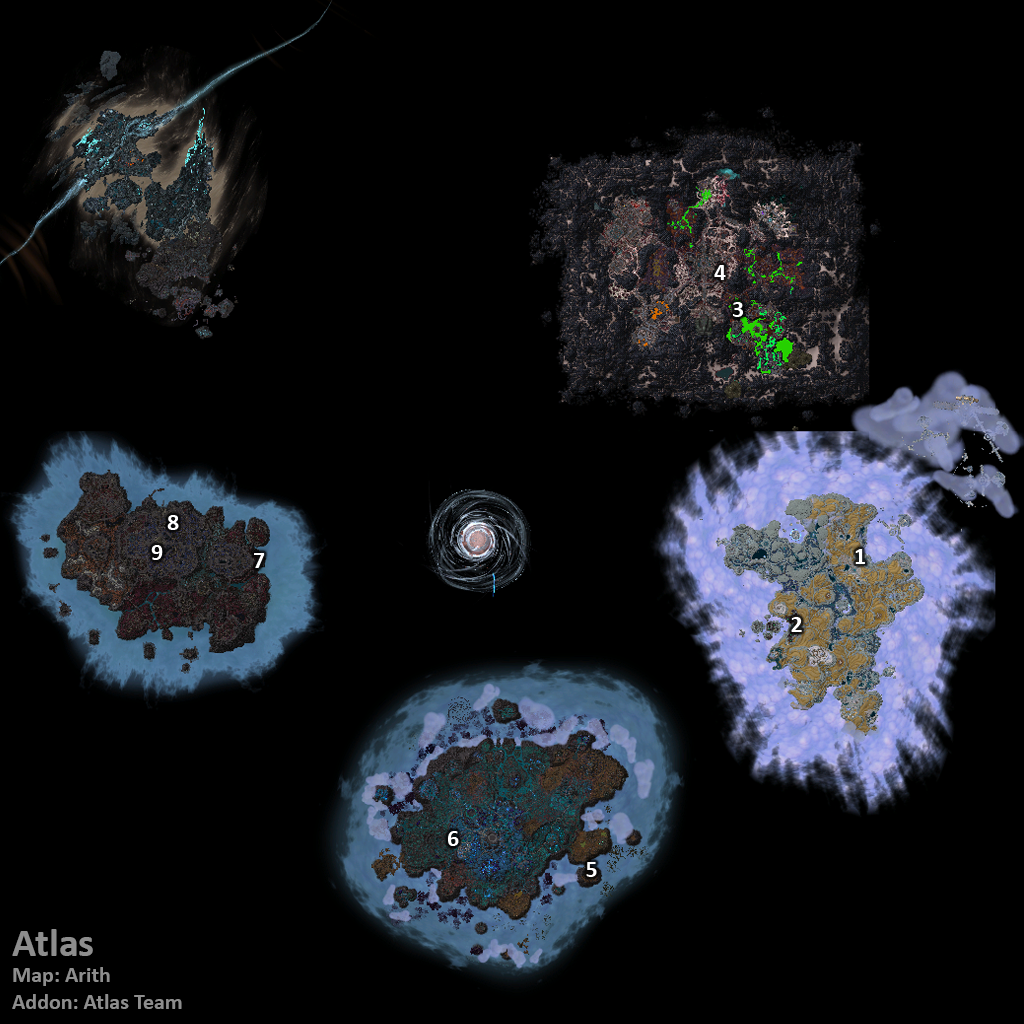
<style>
.page{position:relative;width:1024px;height:1024px;background:#000000}
.page>*{position:absolute;margin:0}
.t1{font:24px "Calibri-Bold";color:#ffffff}
.t2{font:22px "Calibri-Bold";color:#8d8d8d}
.t3{font:40px "Calibri-Bold";color:#8d8d8d}
</style>
<div class="page">
<p class="t1" style="left:714px;top:265px;width:12px;height:15px">4</p>
<p class="t1" style="left:733px;top:302px;width:10px;height:15px">3</p>
<p class="t1" style="left:167px;top:515px;width:12px;height:15px">8</p>
<p class="t1" style="left:151px;top:545px;width:12px;height:15px">9</p>
<p class="t1" style="left:254px;top:553px;width:11px;height:15px">7</p>
<p class="t1" style="left:855px;top:549px;width:10px;height:15px">1</p>
<p class="t1" style="left:791px;top:617px;width:11px;height:15px">2</p>
<p class="t1" style="left:448px;top:831px;width:11px;height:15px">6</p>
<p class="t1" style="left:586px;top:862px;width:11px;height:15px">5</p>
<p class="t2" style="left:12px;top:929px;width:170px;height:80px"><span class="t3">Atlas<br></span>Map: Arith<br>Addon: Atlas Team</p>
</div>
